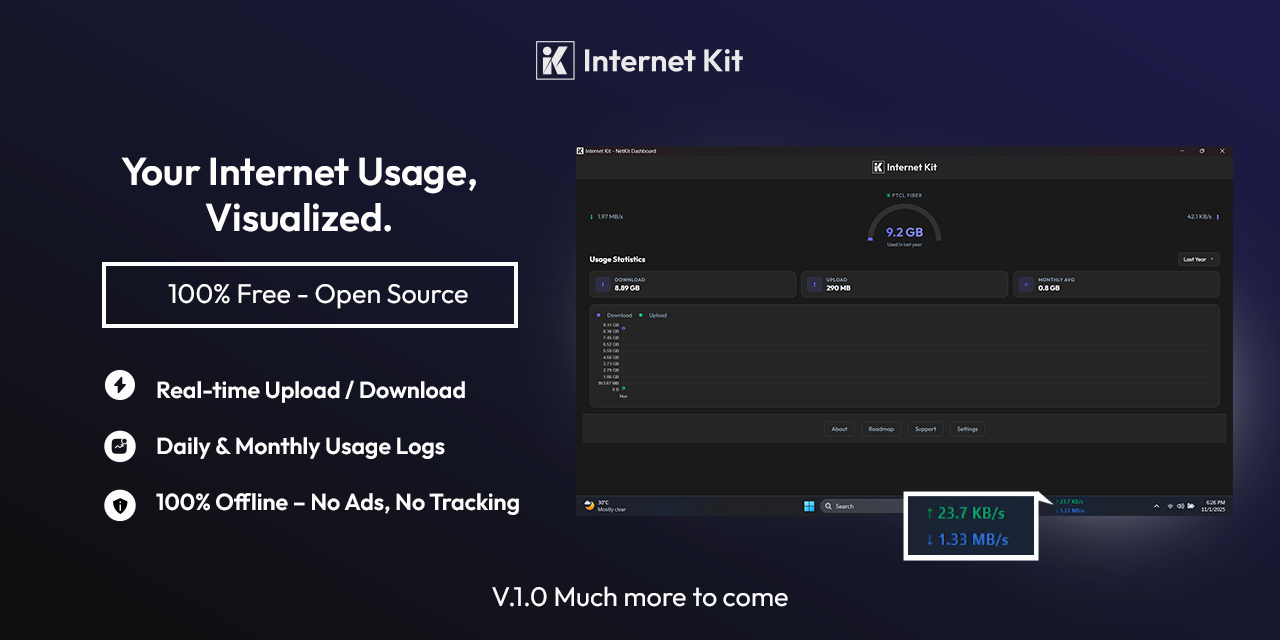
<style>
.page{position:relative;width:1280px;height:640px}
.page>*{position:absolute;margin:0}
.t1{font:38.6px "Outfit-SemiBold";color:#fdfdfd}
.t2{font:27px "Outfit-Regular";color:#fdfdfd}
.t3{font:23.2px/28px "Outfit-SemiBold";color:#fdfdfd}
</style>
<div class="page">
<p class="t1" style="left:121px;top:157px;width:355px;height:75px;text-align:center">Your Internet Usage,<br>Visualized.</p>
<p class="t2" style="left:168px;top:284px;width:300px;height:25px">100% Free - Open Source</p>
<p class="t3" style="left:156px;top:380px;width:363px;height:135px;text-align:justify">Real-time Upload / Download <br> <br>Daily &amp; Monthly Usage Logs  <br><br>100% Offline – No Ads, No Tracking</p>
<p class="t2" style="left:492px;top:586px;width:296px;height:21px">V.1.0 Much more to come</p>
</div>
